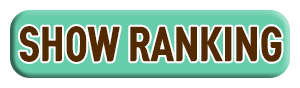
<style>
.page{position:relative;width:300px;height:88px;background:#ffffff}
.page>*{position:absolute;margin:0}
.t1{font:40px "TmonMonsoriBlack";letter-spacing:0.01em;color:#532a00;scale:0.8 1}
</style>
<div class="page">
<p class="t1" style="left:19px;top:26px;width:263px;height:36px">SHOW RANKING</p>
</div>
